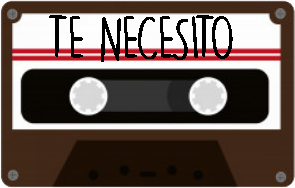
<style>
.page{position:relative;width:295px;height:188px}
.page>*{position:absolute;margin:0}
.t1{font:59px "DKLemonYellowSun";letter-spacing:-0.05em;color:#000000;text-transform:uppercase}
</style>
<div class="page">
<p class="t1" style="left:49px;top:15px;width:184px;height:47px">te necesito</p>
</div>
